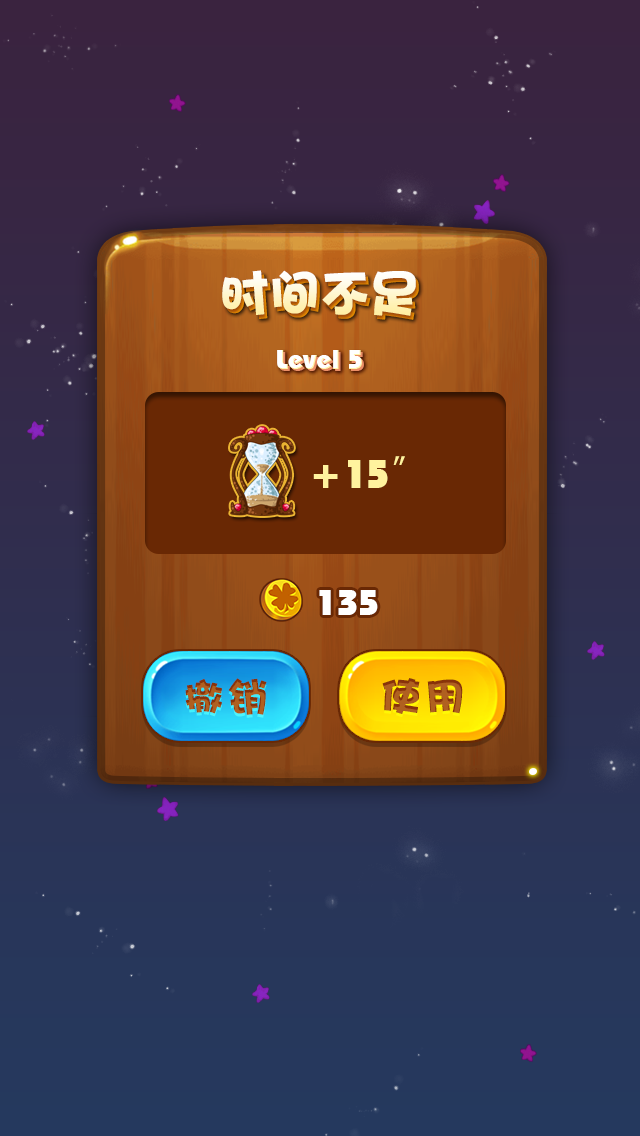
<style>
.page{position:relative;width:640px;height:1136px}
.page>*{position:absolute;margin:0}
.t1{font:50px "DFPHaiBaoW12"}
.t2{font:27.2px "310-CAI978";color:#ffffff}
.t3{font:27.2px "310-CAI978"}
.t4{font:40px "310-CAI978";color:#fff39e}
.t5{font:40px "AdobeHeitiStd-Regular";color:#fff39e}
.t6{font:36.2px "310-CAI978";color:#ffffff}
.t7{font:40px "DFPHaiBaoW12";letter-spacing:0.1em;color:#b06020}
</style>
<div class="page">
<p class="t1" style="left:222px;top:270px;width:194px;height:46px">时间不足</p>
<p class="t1" style="left:225px;top:274px;width:194px;height:46px">时间不足</p>
<p class="t2" style="left:277px;top:350px;width:85px;height:19px">Level 5</p>
<p class="t3" style="left:279px;top:352px;width:85px;height:19px">Level 5</p>
<p class="t4" style="left:313px;top:456px;width:92px;height:32px">+15<span class="t5">″</span></p>
<p class="t6" style="left:319px;top:590px;width:59px;height:25px">135</p>
<p class="t7" style="left:185px;top:678px;width:82px;height:37px">撤销</p>
<p class="t7" style="left:382px;top:678px;width:81px;height:36px">使用</p>
</div>
